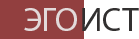
<style>
.page{position:relative;width:139px;height:39px;background:#923f3f}
.page>*{position:absolute;margin:0}
.t1{font:33.3px "MyriadPro-Regular";color:#e3d9d9}
.t2{font:33.3px "MyriadPro-Regular";color:#323030}
</style>
<div class="page">
<p class="t1" style="left:24px;top:8px;width:53px;height:23px">ЭГО</p>
<p class="t2" style="left:82px;top:8px;width:57px;height:23px">ИСТ</p>
</div>
